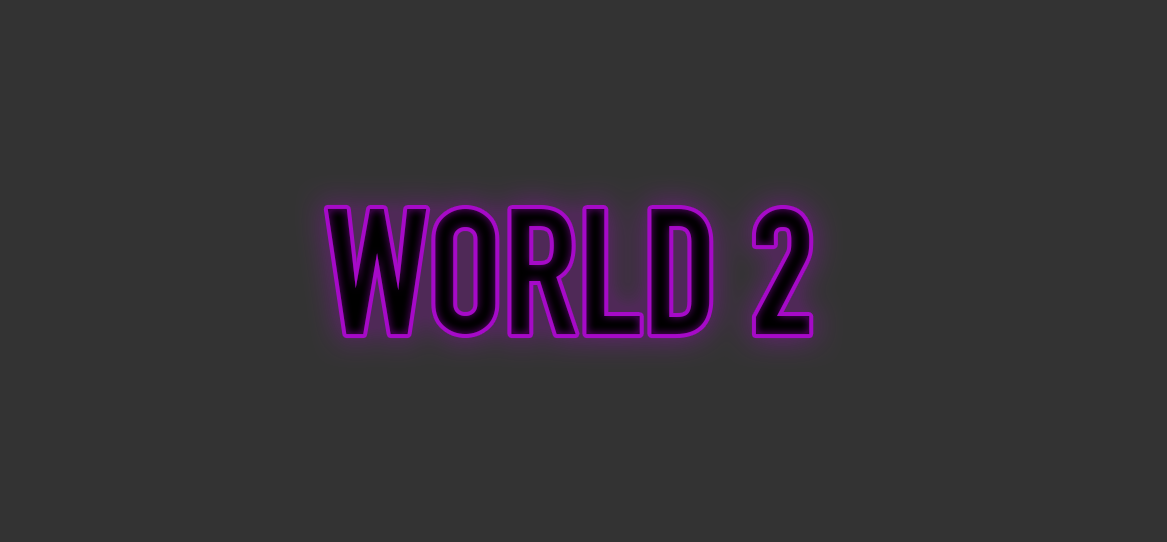
<style>
.page{position:relative;width:1167px;height:542px;background:#333333}
.page>*{position:absolute;margin:0}
.t1{font:175.4px "DINEngschrift";color:#0e0110}
</style>
<div class="page">
<p class="t1" style="left:327px;top:208px;width:483px;height:127px">WORLD 2</p>
</div>
